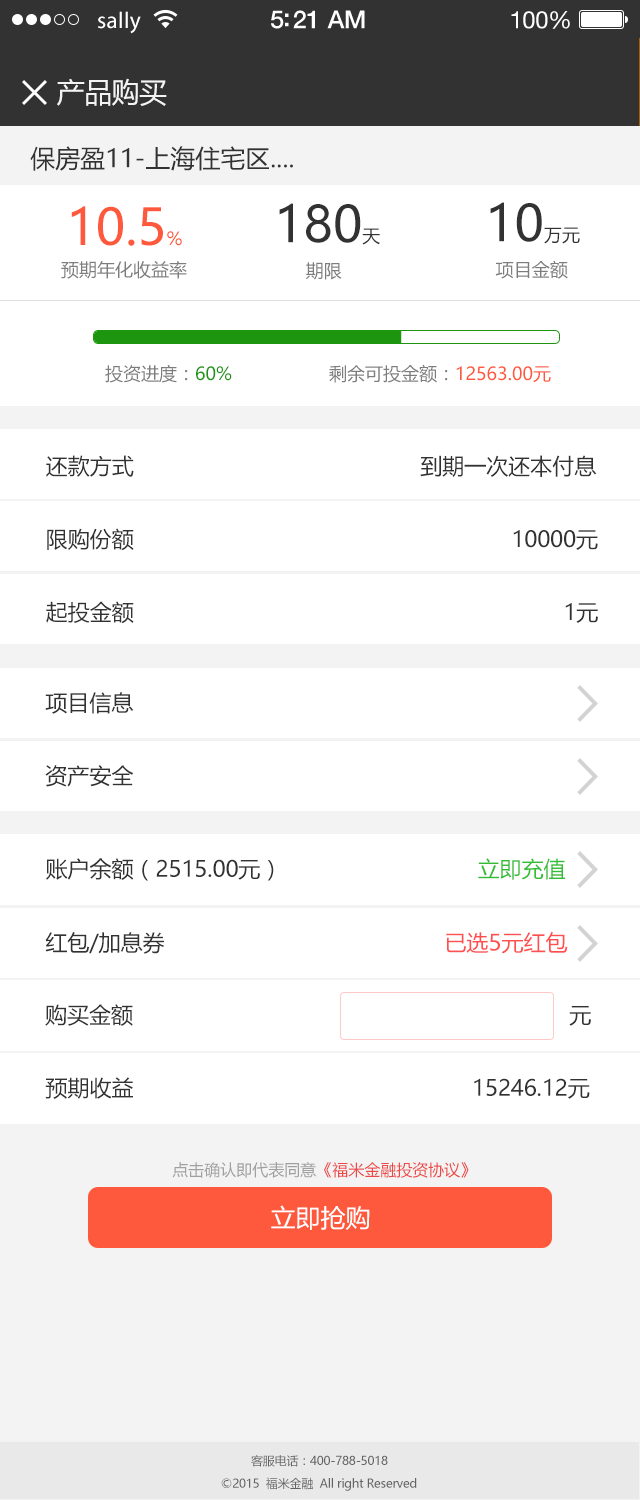
<style>
.page{position:relative;width:640px;height:1500px;background:#ffffff}
.page>*{position:absolute;margin:0}
.t1{font:23px "MyriadPro-Regular";letter-spacing:0.02em;color:#ffffff}
.t2{font:25px "HelveticaNeue-Medium";letter-spacing:-0.02em;color:#ffffff}
.t3{font:24px "HelveticaNeue";letter-spacing:-0.02em;color:#ffffff}
.t4{font:28px "MicrosoftYaHei";letter-spacing:-0.02em;color:#f3f3f3}
.t5{font:25px "MicrosoftYaHei";color:#323232}
.t6{font:50px "MicrosoftYaHei";color:#ff593d}
.t7{font:18px "MicrosoftYaHei";color:#ff593d}
.t8{font:50px "MicrosoftYaHei";color:#323232}
.t9{font:18px "MicrosoftYaHei";color:#323232}
.t10{font:18px "MicrosoftYaHei";color:#7d7d7d}
.t11{font:18px "MicrosoftYaHei";color:#1e950e}
.t12{font:22px "MicrosoftYaHei";color:#323232}
.t13{font:22px "MicrosoftYaHei";color:#31bd34}
.t14{font:22px "MicrosoftYaHei";color:#ff4f4f}
.t15{font:16px "MicrosoftYaHei";color:#ed4949}
.t16{font:16px "MicrosoftYaHei";color:#a0a0a0}
.t17{font:25px "MicrosoftYaHei";color:#ffffff}
.t18{font:12px "MicrosoftYaHei";letter-spacing:-0.02em;color:#646464}
</style>
<div class="page">
<p class="t1" style="left:98px;top:11px;width:43px;height:23px">sally</p>
<p class="t2" style="left:271px;top:10px;width:94px;height:19px">5:21 AM</p>
<p class="t3" style="left:511px;top:11px;width:59px;height:18px">100%</p>
<p class="t4" style="left:57px;top:78px;width:110px;height:28px">产品购买</p>
<p class="t5" style="left:30px;top:146px;width:263px;height:25px">保房盈11-上海住宅区....</p>
<p class="t6" style="left:71px;top:206px;width:111px;height:40px">10.5<span class="t7">%</span></p>
<p class="t8" style="left:279px;top:203px;width:101px;height:42px">180<span class="t9">天</span></p>
<p class="t8" style="left:490px;top:202px;width:90px;height:42px">10<span class="t9">万元</span></p>
<p class="t10" style="left:61px;top:261px;width:126px;height:18px">预期年化收益率</p>
<p class="t10" style="left:306px;top:262px;width:36px;height:18px">期限</p>
<p class="t10" style="left:495px;top:260px;width:73px;height:19px">项目金额</p>
<p class="t10" style="left:105px;top:364px;width:127px;height:19px">投资进度：<span class="t11">60%</span></p>
<p class="t7" style="left:329px;top:364px;width:222px;height:19px"><span class="t10">剩余可投金额：</span>12563.00元</p>
<p class="t12" style="left:46px;top:455px;width:551px;height:22px">还款方式                                            到期一次还本付息</p>
<p class="t12" style="left:47px;top:528px;width:551px;height:23px">限购份额                                                          10000元</p>
<p class="t12" style="left:46px;top:601px;width:552px;height:23px">起投金额                                                                  1元</p>
<p class="t12" style="left:45px;top:692px;width:89px;height:22px">项目信息</p>
<p class="t12" style="left:45px;top:765px;width:89px;height:22px">资产安全</p>
<p class="t12" style="left:46px;top:858px;width:519px;height:23px">账户余额（2515.00元）                              <span class="t13">立即充值</span></p>
<p class="t12" style="left:45px;top:932px;width:523px;height:22px">红包/加息券                                           <span class="t14">已选5元红包</span></p>
<p class="t12" style="left:45px;top:1004px;width:546px;height:22px">购买金额                                                                   元</p>
<p class="t12" style="left:45px;top:1077px;width:545px;height:22px">预期收益                                                    15246.12元</p>
<p class="t15" style="left:172px;top:1162px;width:297px;height:16px"><span class="t16">点击确认即代表同意</span>《福米金融投资协议》</p>
<p class="t17" style="left:271px;top:1205px;width:99px;height:25px">立即抢购</p>
<p class="t18" style="left:251px;top:1455px;width:137px;height:12px">客服电话：400-788-5018</p>
<p class="t18" style="left:221px;top:1477px;width:196px;height:14px">©2015  福米金融  All right Reserved</p>
</div>
